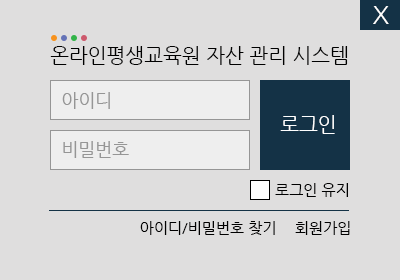
<style>
.page{position:relative;width:400px;height:280px;background:#dfdede}
.page>*{position:absolute;margin:0}
.t1{font:25px "NanumGothic";color:#ffffff}
.t2{font:20px "NanumGothic";color:#000000}
.t3{font:18px "NanumGothic";color:#959595}
.t4{font:20px "NanumGothic";color:#ffffff}
.t5{font:15px "NanumGothic";color:#000000}
</style>
<div class="page">
<p class="t1" style="left:373px;top:6px;width:16px;height:18px">X</p>
<p class="t2" style="left:50px;top:46px;width:298px;height:19px">온라인평생교육원 자산 관리 시스템</p>
<p class="t3" style="left:62px;top:92px;width:48px;height:17px">아이디</p>
<p class="t4" style="left:280px;top:115px;width:55px;height:19px">로그인</p>
<p class="t3" style="left:63px;top:141px;width:66px;height:17px">비밀번호</p>
<p class="t5" style="left:275px;top:183px;width:73px;height:14px">로그인 유지</p>
<p class="t5" style="left:140px;top:221px;width:135px;height:14px">아이디/비밀번호 찾기</p>
<p class="t5" style="left:295px;top:221px;width:55px;height:14px">회원가입</p>
</div>
